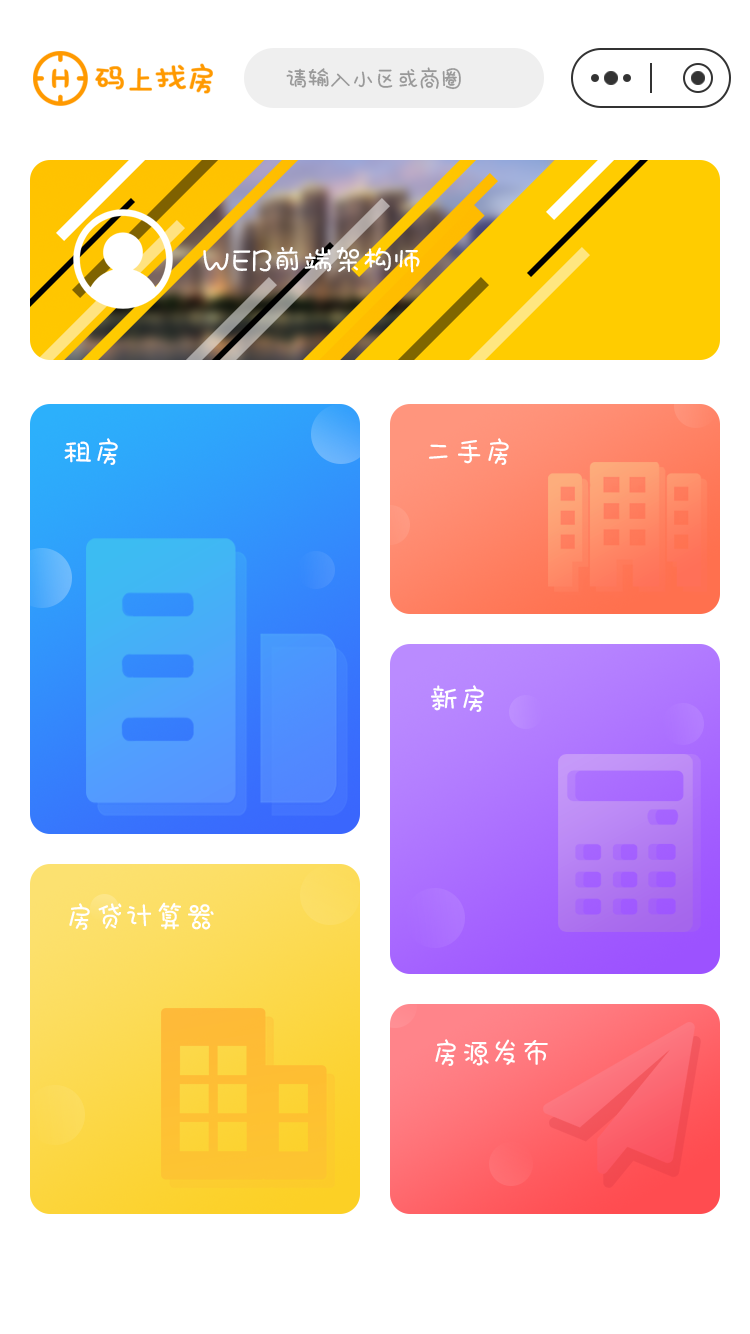
<style>
.page{position:relative;width:750px;height:1334px;background:#ffffff}
.page>*{position:absolute;margin:0}
.t1{font:24px "HYLeMiaoTiJ";letter-spacing:-0.08em;color:#999999}
.t2{font:30px "HYLeMiaoTiJ";color:#ffffff}
</style>
<div class="page">
<p class="t1" style="left:286px;top:67px;width:175px;height:23px">请输入小区或商圈</p>
<p class="t2" style="left:203px;top:247px;width:217px;height:26px">WEB前端架构师</p>
<p class="t2" style="left:64px;top:438px;width:54px;height:27px">租房</p>
<p class="t2" style="left:429px;top:438px;width:80px;height:27px">二手房</p>
<p class="t2" style="left:431px;top:685px;width:53px;height:27px">新房</p>
<p class="t2" style="left:69px;top:902px;width:145px;height:28px">房贷计算器</p>
<p class="t2" style="left:435px;top:1039px;width:113px;height:27px">房源发布</p>
</div>
